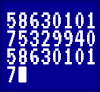
<style>
.page{position:relative;width:100px;height:92px;background:#030092}
.page>*{position:absolute;margin:0}
.t1{font:27px/18px "VT323-Regular";letter-spacing:0.005em;color:#ffffff}
</style>
<div class="page">
<p class="t1" style="left:7px;top:12px;width:88px;height:71px">58630101<br>75329940<br>58630101<br>7</p>
</div>
